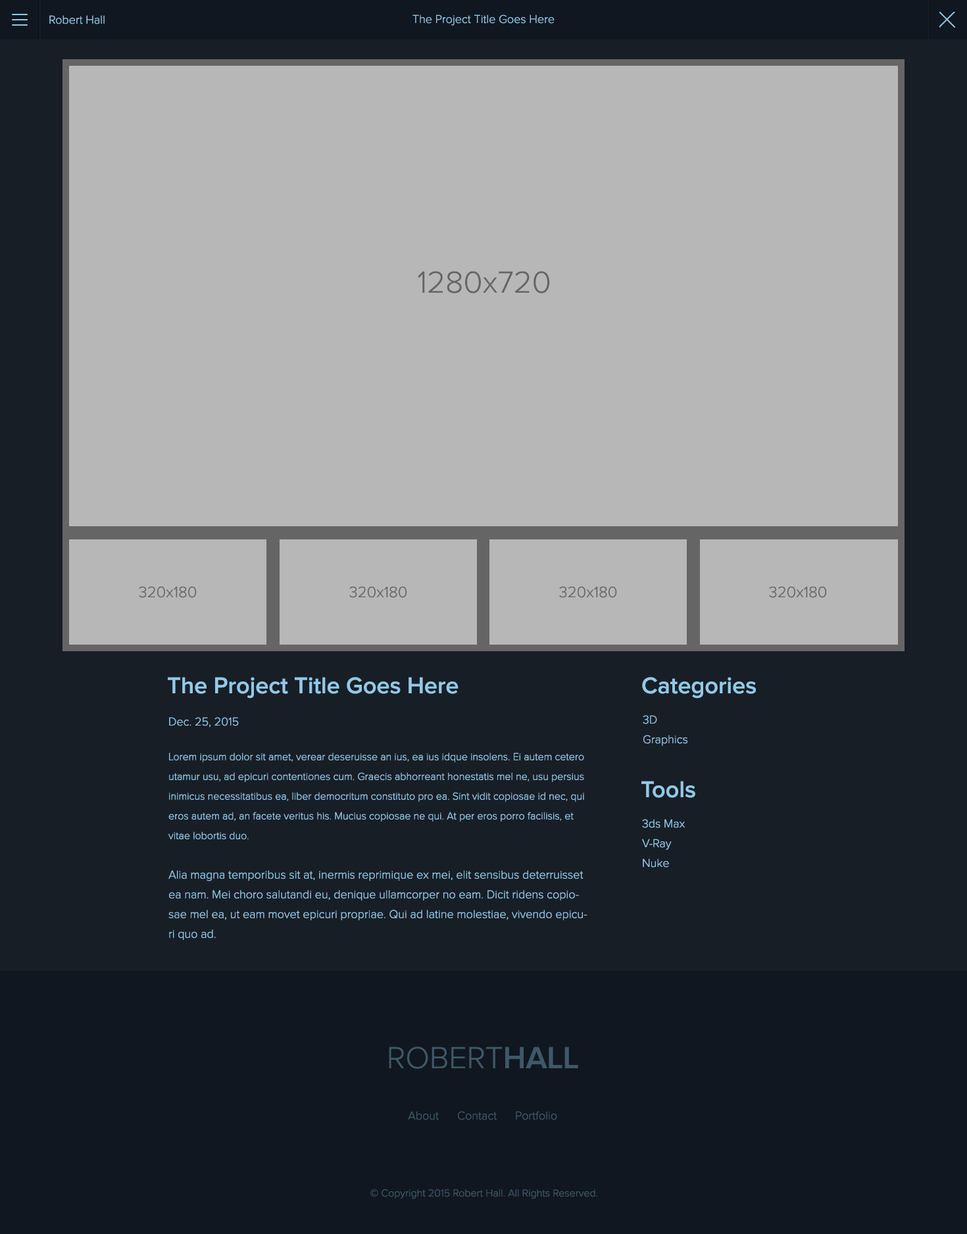
<style>
.page{position:relative;width:967px;height:1234px;background:#b7b7b7}
.page>*{position:absolute;margin:0}
.t1{font:11.8px "ProximaNova-Light";color:#92c9e8}
.t2{font:31.6px "ProximaNova-Light";color:#656565}
.t3{font:15.8px "ProximaNova-Light";color:#656565}
.t4{font:23.7px "ProximaNova-Semibold";color:#92c9e8}
.t5{font:11.8px/19.7px "ProximaNova-Light";color:#92c9e8}
.t6{font:10.5px/19.7px "ProximaNova-Light";color:#92c9e8}
.t7{font:31.6px "ProximaNova-Light";color:#3f5868}
.t8{font:31.6px "ProximaNova-Semibold";color:#3f5868}
.t9{font:11.8px "ProximaNova-Light";color:#3f5868}
.t10{font:10.5px "ProximaNova-Light";color:#3f5868}
</style>
<div class="page">
<p class="t1" style="left:49px;top:15px;width:56px;height:9px">Robert Hall</p>
<p class="t1" style="left:412px;top:14px;width:142px;height:12px">The Project Title Goes Here</p>
<p class="t2" style="left:418px;top:271px;width:132px;height:22px">1280x720</p>
<p class="t3" style="left:139px;top:586px;width:58px;height:12px">320x180</p>
<p class="t3" style="left:349px;top:586px;width:58px;height:12px">320x180</p>
<p class="t3" style="left:559px;top:586px;width:58px;height:12px">320x180</p>
<p class="t3" style="left:769px;top:586px;width:58px;height:12px">320x180</p>
<p class="t4" style="left:168px;top:677px;width:290px;height:21px">The Project Title Goes Here</p>
<p class="t4" style="left:642px;top:677px;width:114px;height:21px">Categories</p>
<p class="t1" style="left:169px;top:717px;width:70px;height:10px">Dec. 25, 2015</p>
<p class="t5" style="left:642px;top:715px;width:45px;height:31px">3D<br>Graphics</p>
<p class="t6" style="left:168px;top:752px;width:419px;height:188px">Lorem ipsum dolor sit amet, verear deseruisse an ius, ea ius idque insolens. Ei autem cetero utamur usu, ad epicuri contentiones cum. Graecis abhorreant honestatis mel ne, usu persius inimicus necessitatibus ea, liber democritum constituto pro ea. Sint vidit copiosae id nec, qui eros autem ad, an facete veritus his. Mucius copiosae ne qui. At per eros porro facilisis, et vitae lobortis duo.<br><span class="t5"><br>Alia magna temporibus sit at, inermis reprimique ex mei, elit sensibus deterruisset ea nam. Mei choro salutandi eu, denique ullamcorper no eam. Dicit ridens copiosae mel ea, ut eam movet epicuri propriae. Qui ad latine molestiae, vivendo epicuri quo ad.</span></p>
<p class="t4" style="left:641px;top:781px;width:54px;height:17px">Tools</p>
<p class="t5" style="left:642px;top:819px;width:43px;height:48px">3ds Max<br>V-Ray<br>Nuke</p>
<p class="t7" style="left:389px;top:1046px;width:189px;height:23px">ROBERT<span class="t8">HALL</span></p>
<p class="t9" style="left:408px;top:1111px;width:149px;height:9px">About      Contact      Portfolio</p>
<p class="t10" style="left:370px;top:1189px;width:228px;height:10px">© Copyright 2015 Robert Hall. All Rights Reserved.</p>
</div>
